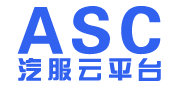
<style>
.page{position:relative;width:180px;height:90px;background:#ffffff}
.page>*{position:absolute;margin:0}
.t1{font:64.3px "FZDHTJW--GB1-0";letter-spacing:0.1em;color:#3061ef}
.t2{font:25px "BDZYJT--GB1-0";letter-spacing:0.2em;color:#3061ef}
</style>
<div class="page">
<p class="t1" style="left:17px;top:6px;width:144px;height:49px">ASC</p>
<p class="t2" style="left:18px;top:58px;width:143px;height:23px">汽服云平台</p>
</div>
